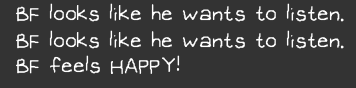
<style>
.page{position:relative;width:356px;height:88px;background:#333333}
.page>*{position:absolute;margin:0}
.t1{font:32px "OMORI_GAME";color:#ffffff}
</style>
<div class="page">
<p class="t1" style="left:16px;top:3px;width:328px;height:19px">BF looks like he wants to listen.</p>
<p class="t1" style="left:16px;top:30px;width:328px;height:19px">BF looks like he wants to listen.</p>
<p class="t1" style="left:16px;top:55px;width:164px;height:19px">BF feels HAPPY!</p>
</div>
